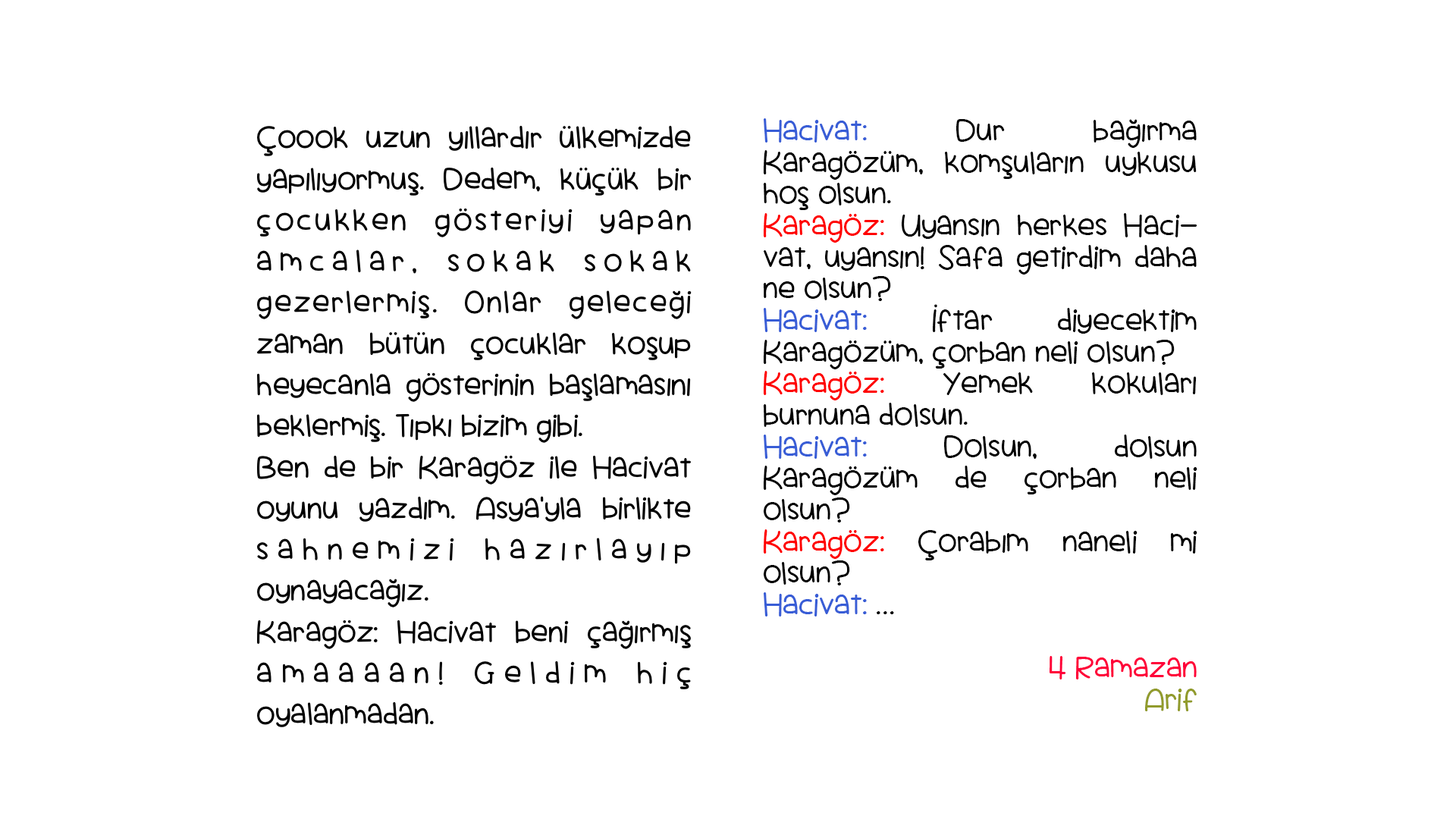
<style>
.page{position:relative;width:1456px;height:819px;background:#ffffff}
.page>*{position:absolute;margin:0}
.t1{font:34.8px "ScrambledTofu";color:#000000}
.t2{font:34.8px/31.6px "ScrambledTofu";color:#000000}
.t3{font:34.8px/31.6px "ScrambledTofu";color:#385dd6}
.t4{font:34.8px/31.6px "ScrambledTofu";color:#ff0000}
.t5{font:34.8px/31.6px "ScrambledTofu";color:#ff0039}
.t6{font:34.8px/31.6px "ScrambledTofu";color:#919b2c}
</style>
<div class="page">
<p class="t1" style="left:0px;top:0px;width:1456px;height:819px;text-align:justify">Çoook uzun yıllardır ülkemizde yapılıyormuş. Dedem, küçük bir çocukken gösteriyi yapan amcalar, sokak sokak gezerlermiş. Onlar geleceği zaman bütün çocuklar koşup heyecanla gösterinin başlamasını beklermiş. Tıpkı bizim gibi.<br>Ben de bir Karagöz ile Hacivat oyunu yazdım. Asya’yla birlikte sahnemizi hazırlayıp oynayacağız.<br>Karagöz: Hacivat beni çağırmış amaaaan! Geldim hiç oyalanmadan.</p>
<p class="t2" style="left:764px;top:118px;width:433px;height:593px;text-align:justify"><span class="t3">Hacivat:</span> Dur bağırma Karagözüm, komşuların uykusu hoş olsun.<br><span class="t4">Karagöz: </span>Uyansın herkes Hacivat, uyansın! Safa getirdim daha ne olsun?<br><span class="t3">Hacivat:</span> İftar diyecektim Karagözüm, çorban neli olsun?<br><span class="t4">Karagöz:</span> Yemek kokuları burnuna dolsun.<br><span class="t3">Hacivat:</span> Dolsun, dolsun Karagözüm de çorban neli olsun?<br><span class="t4">Karagöz:</span> Çorabım naneli mi olsun?<br><span class="t3">Hacivat:</span> …<br><span class="t5">14 Ramazan<br></span><span class="t6">Arif</span></p>
</div>
